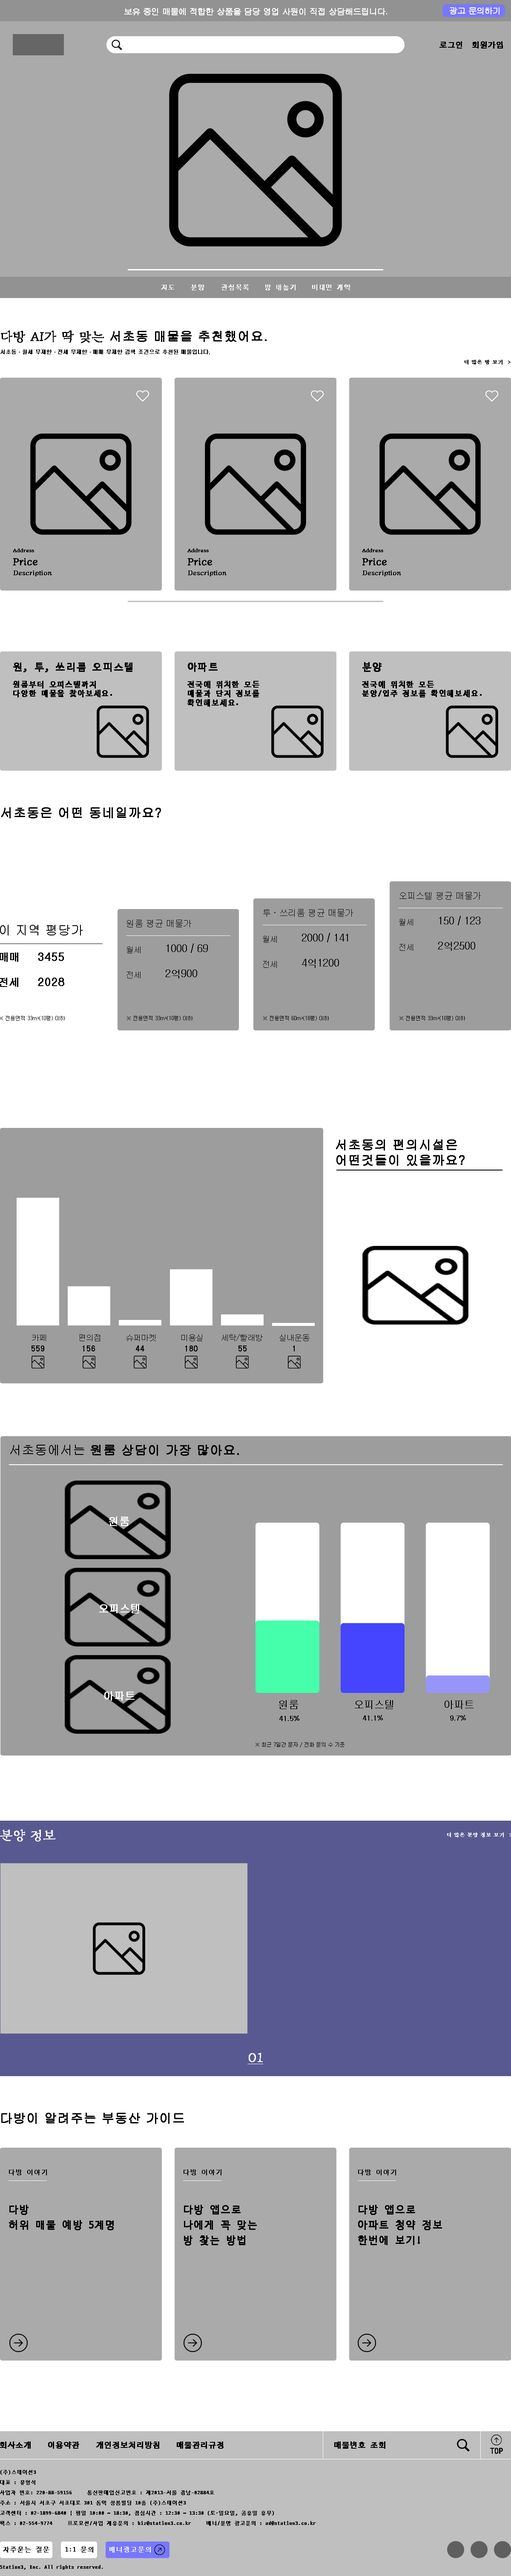
<style>
.page{position:relative;width:511px;height:2576px;background:#ffffff}
.page>*{position:absolute;margin:0}
.t1{font:7.7px "Gulim";color:#ffffff;font-weight:bold}
.t2{font:7.7px "D2Coding";color:#000000;font-weight:bold}
.t3{font:6.8px "D2CodingBold";letter-spacing:-0.01em;color:#ffffff;font-weight:bold}
.t4{font:12.8px "Gulim";color:#000000;font-weight:bold}
.t5{font:12.8px "Diphylleia-Regular";color:#000000;font-weight:bold}
.t6{font:5.1px "Gulim";color:#000000;font-weight:bold}
.t7{font:5.1px "Diphylleia-Regular";color:#000000;font-weight:bold}
.t8{font:10.2px "Diphylleia-Regular";color:#000000;font-weight:bold}
.t9{font:6.8px "Diphylleia-Regular";color:#000000;font-weight:bold}
.t10{font:10.2px "D2CodingBold";letter-spacing:-0.01em;color:#000000;font-weight:bold}
.t11{font:7.7px "D2CodingBold";letter-spacing:-0.01em;color:#000000;font-weight:bold}
.t12{font:8.5px "Gulim";color:#000000}
.t13{font:10.2px "Gulim";color:#000000}
.t14{font:12.8px "Gulim";color:#000000}
.t15{font:7.7px "Gulim";color:#000000}
.t16{font:10.2px "Gulim";color:#000000;font-weight:bold}
.t17{font:11.1px "Gulim";color:#000000;font-weight:bold}
.t18{font:5.1px "Gulim";color:#000000}
.t19{font:7.7px "Gulim";color:#000000;font-weight:bold}
.t20{font:10.2px "Gulim";color:#ffffff;font-weight:bold}
.t21{font:10.2px "Gulim";color:#fefefe;font-weight:bold}
.t22{font:6.8px "Gulim";color:#000000;font-weight:bold}
.t23{font:12.8px "Diphylleia-Regular";color:#ffffff;font-weight:bold}
.t24{font:5.1px "Diphylleia-Regular";color:#ffffff;font-weight:bold}
.t25{font:12.8px "Diphylleia-Regular";color:#ffffff;font-weight:bold;text-decoration:underline}
.t26{font:6.8px "D2Coding";color:#000000;font-weight:bold}
.t27{font:10.2px/15.3px "D2Coding";color:#000000;font-weight:bold}
.t28{font:5.1px/10.2px "D2Coding";color:#000000;font-weight:bold}
.t29{font:6.8px "D2Coding";color:#ffffff;font-weight:bold}
.t30{font:5.1px "D2Coding";color:#000000;font-weight:bold}
</style>
<div class="page">
<p class="t1" style="left:124px;top:8px;width:263px;height:7px">보유 중인 매물에 적합한 상품을 담당 영업 사원이 직접 상담해드립니다.</p>
<p class="t1" style="left:450px;top:7px;width:49px;height:7px">광고 문의하기</p>
<p class="t2" style="left:439px;top:41px;width:23px;height:8px">로그인</p>
<p class="t2" style="left:472px;top:41px;width:31px;height:8px">회원가입</p>
<p class="t3" style="left:161px;top:284px;width:13px;height:6px">지도</p>
<p class="t3" style="left:191px;top:284px;width:13px;height:6px">분양</p>
<p class="t3" style="left:221px;top:284px;width:28px;height:6px">관심목록</p>
<p class="t3" style="left:265px;top:284px;width:30px;height:6px">방 내놓기</p>
<p class="t3" style="left:312px;top:284px;width:38px;height:6px">비대면 계약</p>
<p class="t4" style="left:1px;top:330px;width:266px;height:13px"><span class="t5">다방 AI가 딱 맞는 </span>서초동 매물을 추천했어요.</p>
<p class="t6" style="left:0px;top:350px;width:210px;height:4px">서초동ㆍ월세 무제한ㆍ전세 무제한ㆍ매매 무제한 검색 조건으로 추천된 매물입니다.</p>
<p class="t7" style="left:464px;top:360px;width:47px;height:4px">더 많은 방 보기  &gt;</p>
<p class="t7" style="left:13px;top:548px;width:21px;height:4px">Address</p>
<p class="t7" style="left:187px;top:548px;width:22px;height:4px">Address</p>
<p class="t7" style="left:362px;top:548px;width:21px;height:4px">Address</p>
<p class="t8" style="left:13px;top:558px;width:24px;height:7px">Price</p>
<p class="t8" style="left:188px;top:558px;width:24px;height:7px">Price</p>
<p class="t8" style="left:362px;top:558px;width:25px;height:7px">Price</p>
<p class="t9" style="left:13px;top:571px;width:39px;height:6px">Description</p>
<p class="t9" style="left:188px;top:571px;width:39px;height:6px">Description</p>
<p class="t9" style="left:362px;top:571px;width:39px;height:6px">Description</p>
<p class="t10" style="left:13px;top:663px;width:119px;height:9px">원, 투, 쓰리룸 오피스텔</p>
<p class="t10" style="left:188px;top:663px;width:30px;height:9px">아파트</p>
<p class="t10" style="left:362px;top:662px;width:20px;height:10px">분양</p>
<p class="t11" style="left:13px;top:681px;width:99px;height:16px">원룸부터 오피스텔까지<br>다양한 매물을 찾아보세요.</p>
<p class="t11" style="left:187px;top:681px;width:72px;height:26px">전국에 위치한 모든<br>매물과 단지 정보를<br>확인해보세요.</p>
<p class="t11" style="left:362px;top:681px;width:120px;height:16px">전국에 위치한 모든<br>분양/입주 정보를 확인해보세요.</p>
<p class="t4" style="left:1px;top:807px;width:160px;height:11px">서초동은 어떤 동네일까요?</p>
<p class="t12" style="left:399px;top:892px;width:82px;height:8px">오피스텔 평균 매물가</p>
<p class="t12" style="left:263px;top:909px;width:90px;height:8px">투ㆍ쓰리룸 평균 매물가</p>
<p class="t13" style="left:439px;top:916px;width:41px;height:9px">150 / 123</p>
<p class="t14" style="left:0px;top:925px;width:83px;height:10px">이 지역 평당가</p>
<p class="t12" style="left:126px;top:920px;width:65px;height:7px">원룸 평균 매물가</p>
<p class="t15" style="left:399px;top:919px;width:14px;height:7px">월세</p>
<p class="t15" style="left:263px;top:936px;width:14px;height:7px">월세</p>
<p class="t13" style="left:302px;top:933px;width:46px;height:9px">2000 / 141</p>
<p class="t13" style="left:438px;top:942px;width:37px;height:9px">2억2500</p>
<p class="t16" style="left:0px;top:952px;width:18px;height:10px">매매</p>
<p class="t17" style="left:38px;top:952px;width:26px;height:9px">3455</p>
<p class="t15" style="left:126px;top:947px;width:15px;height:6px">월세</p>
<p class="t13" style="left:166px;top:944px;width:42px;height:9px">1000 / 69</p>
<p class="t15" style="left:399px;top:944px;width:14px;height:7px">전세</p>
<p class="t15" style="left:263px;top:961px;width:14px;height:7px">전세</p>
<p class="t13" style="left:302px;top:959px;width:37px;height:9px">4억1200</p>
<p class="t16" style="left:0px;top:978px;width:18px;height:9px">전세</p>
<p class="t17" style="left:38px;top:978px;width:26px;height:8px">2028</p>
<p class="t15" style="left:126px;top:972px;width:15px;height:6px">전세</p>
<p class="t13" style="left:166px;top:970px;width:31px;height:8px">2억900</p>
<p class="t18" style="left:0px;top:1016px;width:65px;height:5px">※ 전용면적 33m²(10평) 이하</p>
<p class="t18" style="left:127px;top:1016px;width:66px;height:5px">※ 전용면적 33m²(10평) 이하</p>
<p class="t18" style="left:263px;top:1016px;width:66px;height:5px">※ 전용면적 60m²(18평) 이하</p>
<p class="t18" style="left:399px;top:1016px;width:66px;height:5px">※ 전용면적 33m²(10평) 이하</p>
<p class="t4" style="left:336px;top:1139px;width:129px;height:27px">서초동의 편의시설은<br>어떤것들이 있을까요?</p>
<p class="t15" style="left:32px;top:1334px;width:14px;height:7px">카페</p>
<p class="t15" style="left:79px;top:1334px;width:21px;height:7px">편의점</p>
<p class="t15" style="left:126px;top:1334px;width:30px;height:7px">슈퍼마켓</p>
<p class="t15" style="left:181px;top:1334px;width:21px;height:7px">미용실</p>
<p class="t15" style="left:221px;top:1334px;width:42px;height:7px">세탁/빨래방</p>
<p class="t15" style="left:279px;top:1334px;width:31px;height:7px">실내운동</p>
<p class="t19" style="left:32px;top:1345px;width:12px;height:6px">559</p>
<p class="t19" style="left:83px;top:1345px;width:12px;height:6px">156</p>
<p class="t19" style="left:136px;top:1345px;width:8px;height:6px">44</p>
<p class="t19" style="left:185px;top:1345px;width:13px;height:6px">180</p>
<p class="t19" style="left:238px;top:1345px;width:9px;height:6px">55</p>
<p class="t19" style="left:293px;top:1345px;width:2px;height:6px">1</p>
<p class="t4" style="left:10px;top:1445px;width:229px;height:11px"><span class="t14">서초동에서는 </span>원룸 상담이 가장 많아요.</p>
<p class="t20" style="left:109px;top:1517px;width:20px;height:9px">원룸</p>
<p class="t21" style="left:99px;top:1604px;width:40px;height:9px">오피스텔</p>
<p class="t20" style="left:104px;top:1691px;width:31px;height:10px">아파트</p>
<p class="t13" style="left:279px;top:1700px;width:19px;height:9px">원룸</p>
<p class="t13" style="left:355px;top:1700px;width:38px;height:9px">오피스텔</p>
<p class="t13" style="left:445px;top:1700px;width:28px;height:9px">아파트</p>
<p class="t22" style="left:279px;top:1715px;width:20px;height:6px">41.5%</p>
<p class="t22" style="left:363px;top:1715px;width:20px;height:6px">41.1%</p>
<p class="t22" style="left:450px;top:1715px;width:16px;height:6px">9.7%</p>
<p class="t18" style="left:255px;top:1742px;width:89px;height:5px">※ 최근 7일간 문자 / 전화 문의 수 기준</p>
<p class="t23" style="left:0px;top:1829px;width:55px;height:13px">분양 정보</p>
<p class="t24" style="left:447px;top:1832px;width:65px;height:5px">더 많은 분양 정보 보기  &gt;</p>
<p class="t25" style="left:247px;top:2053px;width:16px;height:11px">01</p>
<p class="t4" style="left:1px;top:2113px;width:183px;height:11px">다방이 알려주는 부동산 가이드</p>
<p class="t26" style="left:9px;top:2169px;width:38px;height:6px">다방 이야기</p>
<p class="t26" style="left:184px;top:2169px;width:37px;height:6px">다방 이야기</p>
<p class="t26" style="left:358px;top:2169px;width:38px;height:6px">다방 이야기</p>
<p class="t27" style="left:9px;top:2205px;width:105px;height:25px">다방<br>허위 매물 예방 5계명</p>
<p class="t27" style="left:184px;top:2205px;width:73px;height:41px">다방 앱으로<br>나에게 꼭 맞는<br>방 찾는 방법</p>
<p class="t27" style="left:358px;top:2205px;width:84px;height:40px">다방 앱으로<br>아파트 청약 정보<br>한번에 보기!</p>
<p class="t2" style="left:0px;top:2441px;width:31px;height:8px">회사소개</p>
<p class="t2" style="left:48px;top:2441px;width:31px;height:8px">이용약관</p>
<p class="t2" style="left:96px;top:2441px;width:63px;height:8px">개인정보처리방침</p>
<p class="t2" style="left:177px;top:2441px;width:47px;height:8px">매물관리규정</p>
<p class="t2" style="left:334px;top:2441px;width:51px;height:8px">매물번호 조회</p>
<p class="t2" style="left:490px;top:2448px;width:13px;height:6px">TOP</p>
<p class="t28" style="left:0px;top:2470px;width:316px;height:56px">(주)스테이션3<br>대표 : 유형석<br>사업자 번호: 220-88-59156     통신판매업신고번호 : 제2013-서울 강남-02884호<br>주소 : 서울시 서초구 서초대로 301 동익 성봉빌딩 10층 (주)스테이션3<br>고객센터 : 02-1899-6840 | 평일 10:00 ~ 18:30, 점심시간 : 12:30 ~ 13:30 (토·일요일, 공휴일 휴무)<br>팩스 : 02-554-9774     프로모션/사업 제휴문의 : biz@station3.co.kr     배너/분양 광고문의 : ad@station3.co.kr</p>
<p class="t26" style="left:3px;top:2547px;width:46px;height:6px">자주묻는 질문</p>
<p class="t26" style="left:65px;top:2547px;width:28px;height:6px">1:1 문의</p>
<p class="t29" style="left:109px;top:2547px;width:42px;height:6px">배너광고문의</p>
<p class="t30" style="left:0px;top:2565px;width:103px;height:5px">Station3, Inc. All rights reserved.</p>
</div>
